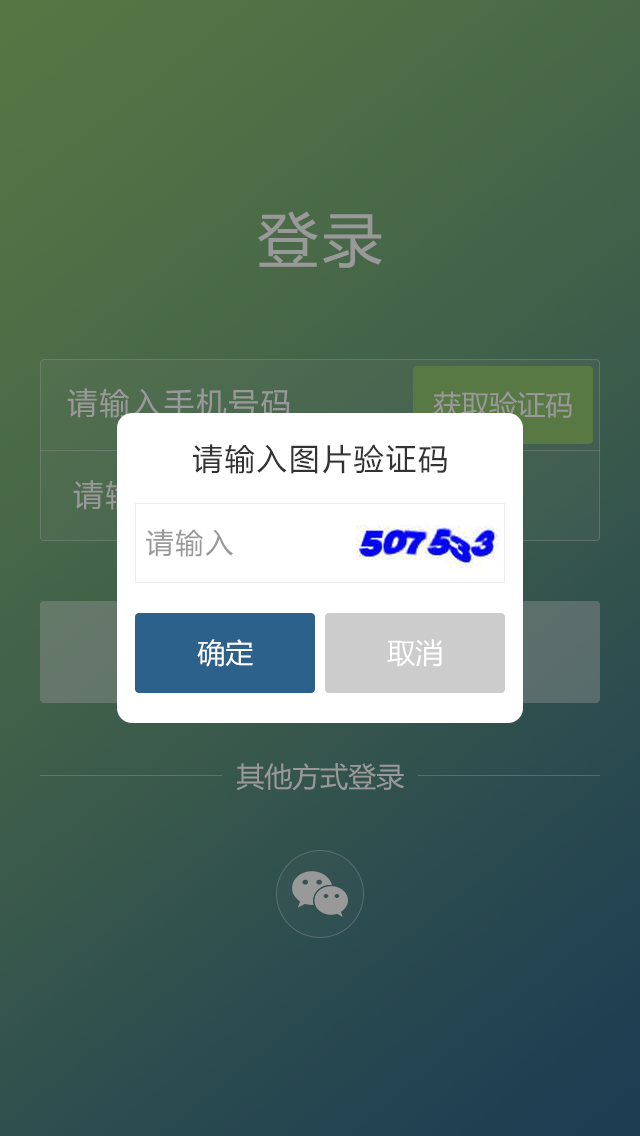
<style>
.page{position:relative;width:640px;height:1136px}
.page>*{position:absolute;margin:0}
.t1{font:60px "MicrosoftYaHei";letter-spacing:0.075em;color:#999999}
.t2{font:30px "MicrosoftYaHei";letter-spacing:0.075em;color:#999999}
.t3{font:28px "MicrosoftYaHei";color:#999999}
.t4{font:30px "MicrosoftYaHei";letter-spacing:0.075em;color:#333333}
.t5{font:28px "MicrosoftYaHei";letter-spacing:0.075em;color:#999999}
.t6{font:28px "MicrosoftYaHei";color:#ffffff}
</style>
<div class="page">
<p class="t1" style="left:258px;top:211px;width:124px;height:57px">登录</p>
<p class="t2" style="left:67px;top:388px;width:223px;height:30px">请输入手机号码</p>
<p class="t3" style="left:433px;top:391px;width:139px;height:28px">获取验证码</p>
<p class="t4" style="left:193px;top:444px;width:254px;height:30px">请输入图片验证码</p>
<p class="t5" style="left:146px;top:529px;width:87px;height:28px">请输入</p>
<p class="t6" style="left:197px;top:639px;width:56px;height:28px">确定</p>
<p class="t6" style="left:387px;top:639px;width:55px;height:28px">取消</p>
<p class="t3" style="left:236px;top:763px;width:168px;height:28px">其他方式登录</p>
</div>
